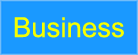
<style>
.page{position:relative;width:138px;height:55px;background:#1a99ff}
.page>*{position:absolute;margin:0}
.t1{font:27.5px "ArialMT";color:#f6ff00}
</style>
<div class="page">
<p class="t1" style="left:14px;top:17px;width:110px;height:21px">Business</p>
</div>
